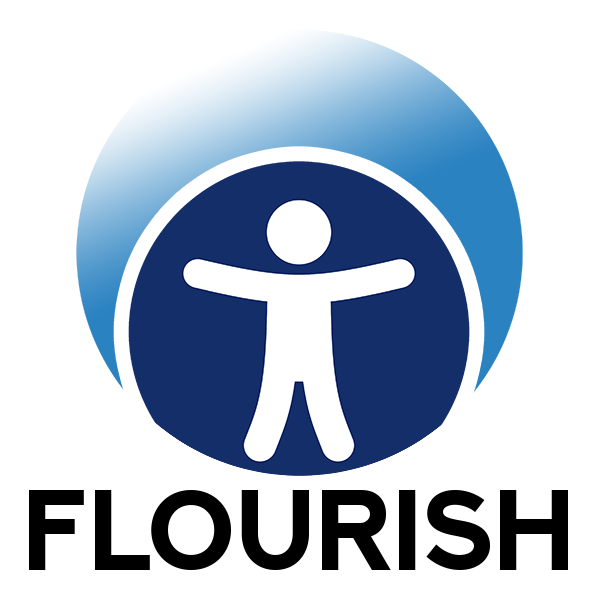
<style>
.page{position:relative;width:600px;height:600px;background:#ffffff}
.page>*{position:absolute;margin:0}
.t1{font:111.4px "NEXTART-Bold";color:#000000}
</style>
<div class="page">
<p class="t1" style="left:29px;top:490px;width:539px;height:80px">FloUrish</p>
</div>
